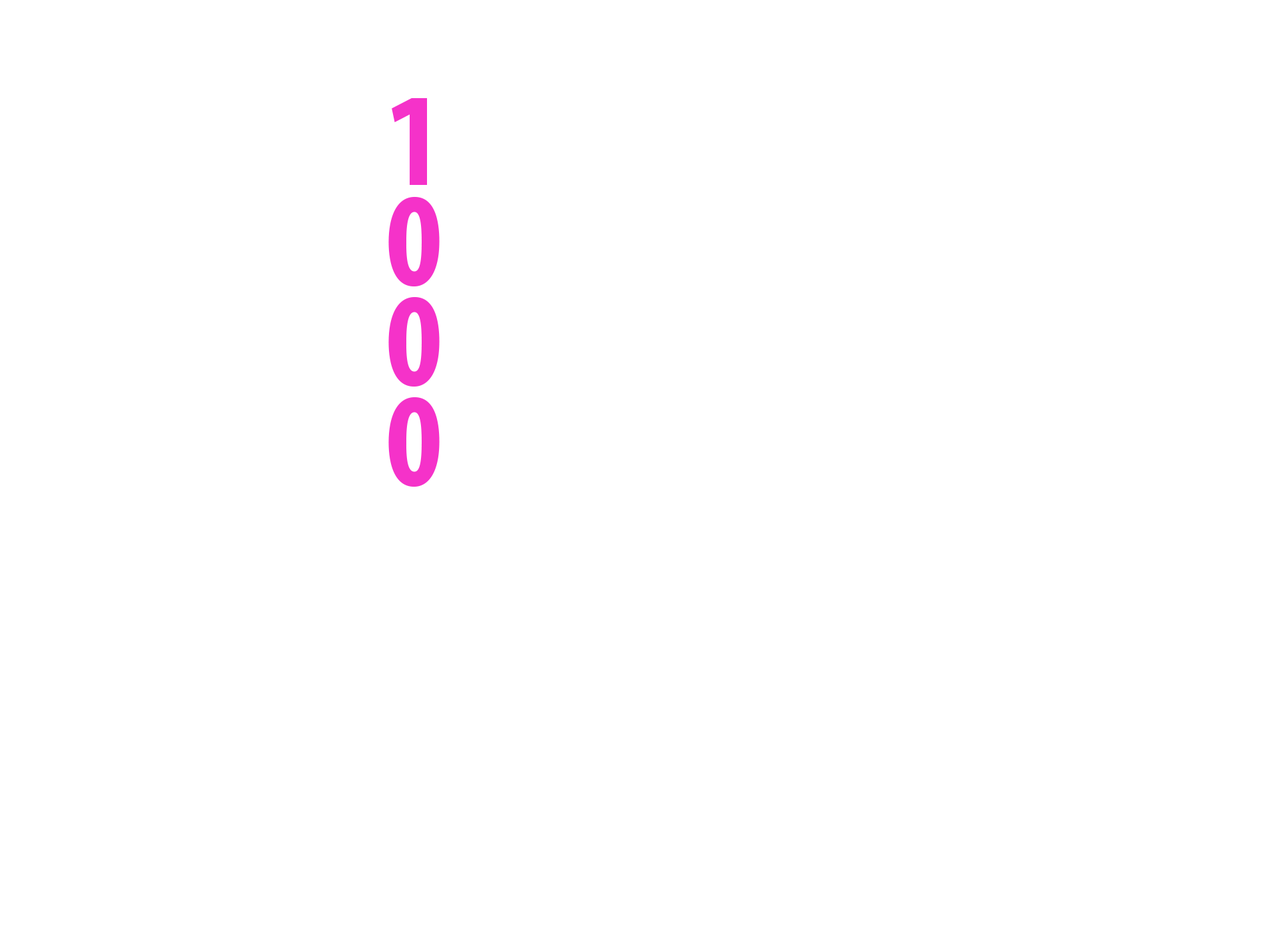
<style>
.page{position:relative;width:1261px;height:946px;background:#ffffff}
.page>*{position:absolute;margin:0}
.t1{font:133.5px/100.1px "MyriadPro-BoldCond";color:#f532c9}
</style>
<div class="page">
<p class="t1" style="left:388px;top:98px;width:52px;height:389px">1<br>0<br>0<br>0</p>
</div>
